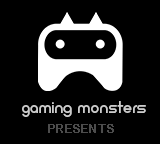
<style>
.page{position:relative;width:160px;height:144px;background:#000000}
.page>*{position:absolute;margin:0}
.t1{font:18.8px "Neometric-Medium";color:#cccccc}
.t2{font:12px "ArialRoundedMTBold";letter-spacing:0.02em;color:#4c4c4c}
</style>
<div class="page">
<p class="t1" style="left:22px;top:101px;width:124px;height:16px">gaming monsters</p>
<p class="t2" style="left:48px;top:124px;width:66px;height:9px">PRESENTS</p>
</div>
